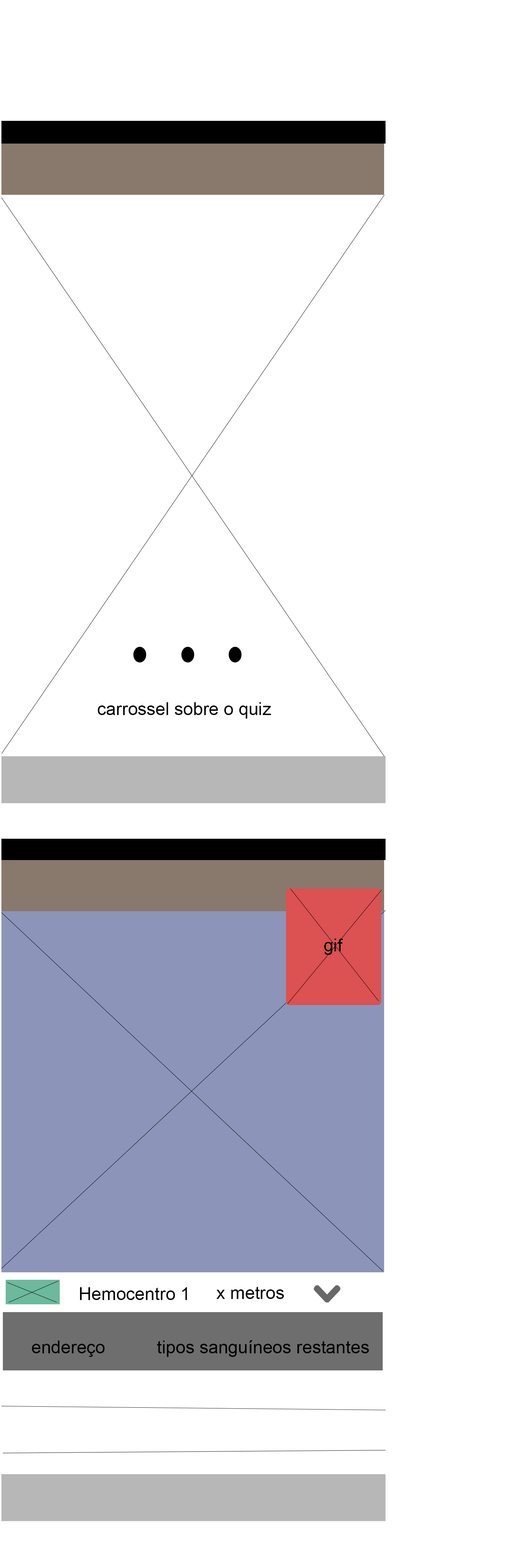
<style>
.page{position:relative;width:515px;height:1568px;background:#ffffff}
.page>*{position:absolute;margin:0}
.t1{font:17.8px "ArialMT";color:#000000}
</style>
<div class="page">
<p class="t1" style="left:98px;top:702px;width:173px;height:17px">carrossel sobre o quiz</p>
<p class="t1" style="left:324px;top:939px;width:19px;height:16px">gif</p>
<p class="t1" style="left:80px;top:1287px;width:107px;height:13px">Hemocentro 1</p>
<p class="t1" style="left:216px;top:1287px;width:68px;height:12px">x metros</p>
<p class="t1" style="left:32px;top:1341px;width:72px;height:16px">endereço</p>
<p class="t1" style="left:157px;top:1340px;width:212px;height:17px">tipos sanguíneos restantes</p>
</div>
